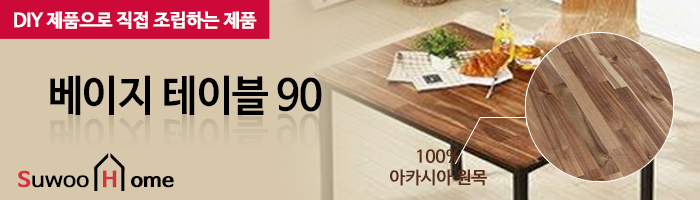
<style>
.page{position:relative;width:700px;height:200px;background:#d7c8ab}
.page>*{position:absolute;margin:0}
.t1{font:18.6px "NanumBarunGothicBold";letter-spacing:-0.025em;color:#ffffff;font-weight:bold}
.t2{font:42.5px "NanumBarunGothicBold";letter-spacing:-0.025em;color:#000000;scale:0.96 1}
.t3{font:17.2px "NanumBarunGothicBold";letter-spacing:-0.025em;color:#592c19;scale:1.05 1}
.t4{font:20.4px "NanumBarunGothic";letter-spacing:-0.025em;color:#000000;font-weight:bold;scale:1.13 1}
.t5{font:20.4px "NanumBarunGothicBold";letter-spacing:-0.025em;color:#d4323d;font-weight:bold;scale:1.13 1}
.t6{font:21.3px "NanumBarunGothicBold";letter-spacing:-0.025em;color:#d4323d;font-weight:bold;scale:1.04 1}
.t7{font:18.6px "NanumBarunGothicBold";letter-spacing:-0.025em;color:#000000;font-weight:bold;scale:1.13 1}
</style>
<div class="page">
<p class="t1" style="left:14px;top:11px;width:243px;height:18px">DIY 제품으로 직접 조립하는 제품</p>
<p class="t2" style="left:50px;top:75px;width:272px;height:40px">베이지 테이블 90</p>
<p class="t3" style="left:390px;top:149px;width:97px;height:37px;text-align:center">100%<br>아카시아 원목</p>
<p class="t4" style="left:18px;top:170px;width:71px;height:18px"><span class="t5">S</span>uwoo</p>
<p class="t6" style="left:103px;top:170px;width:14px;height:18px">H</p>
<p class="t7" style="left:131px;top:176px;width:43px;height:12px">ome</p>
</div>
